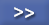
<style>
.page{position:relative;width:49px;height:25px}
.page>*{position:absolute;margin:0}
.t1{font:18px "MyriadPro-Bold";color:#ffffff}
</style>
<div class="page">
<p class="t1" style="left:14px;top:7px;width:20px;height:11px">&gt;&gt;</p>
</div>
